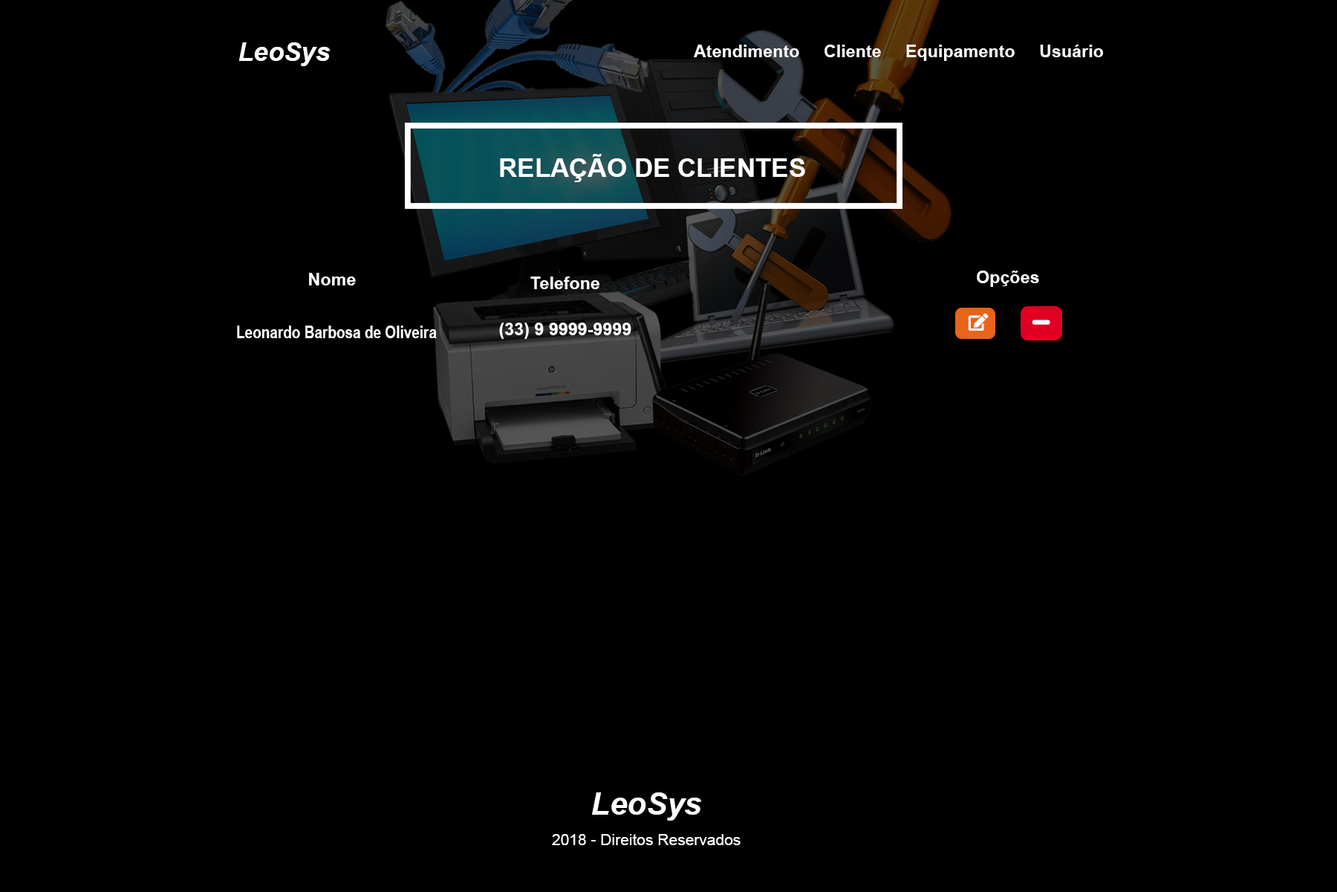
<style>
.page{position:relative;width:1337px;height:892px;background:#000000}
.page>*{position:absolute;margin:0}
.t1{font:44.6px "Arial-BoldItalicMT";color:#fffdfd}
.t2{font:29.7px "Arial-BoldMT";color:#fffdfd}
.t3{font:44.6px "Arial-BoldMT";color:#fffdfd}
.t4{font:29.7px "Arial-BoldMT";color:#ffffff}
.t5{font:29.3px "Arial-BoldMT";color:#ffffff;scale:0.83 1}
.t6{font:53.5px "Arial-BoldItalicMT";color:#ffffff}
.t7{font:26.7px "ArialMT";color:#ffffff}
</style>
<div class="page">
<p class="t1" style="left:239px;top:42px;width:92px;height:24px">LeoSys</p>
<p class="t2" style="left:694px;top:45px;width:409px;height:16px">Atendimento     Cliente     Equipamento     Usuário</p>
<p class="t3" style="left:500px;top:154px;width:305px;height:28px">RELAÇÃO DE CLIENTES</p>
<p class="t4" style="left:309px;top:273px;width:47px;height:12px">Nome</p>
<p class="t4" style="left:531px;top:276px;width:69px;height:13px">Telefone</p>
<p class="t4" style="left:977px;top:270px;width:62px;height:17px">Opções</p>
<p class="t5" style="left:237px;top:325px;width:200px;height:13px">Leonardo Barbosa de Oliveira</p>
<p class="t4" style="left:499px;top:322px;width:133px;height:17px">(33) 9 9999-9999</p>
<p class="t6" style="left:592px;top:792px;width:110px;height:28px">LeoSys</p>
<p class="t7" style="left:552px;top:834px;width:189px;height:11px">2018 - Direitos Reservados</p>
</div>
